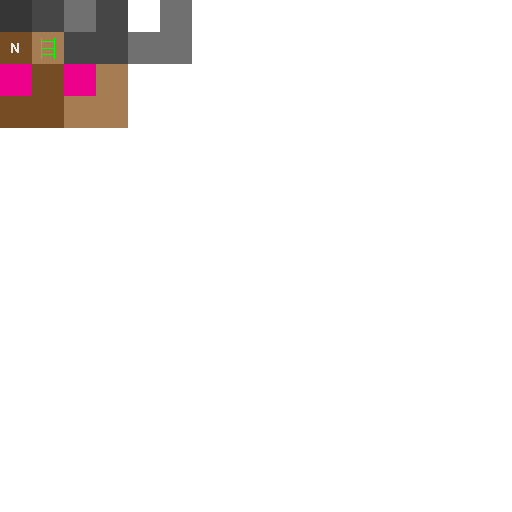
<style>
.page{position:relative;width:512px;height:512px;background:#ffffff}
.page>*{position:absolute;margin:0}
.t1{font:14px "ArialMT";color:#eaeaea;font-weight:bold}
</style>
<div class="page">
<p class="t1" style="left:11px;top:43px;width:8px;height:10px">N</p>
</div>
